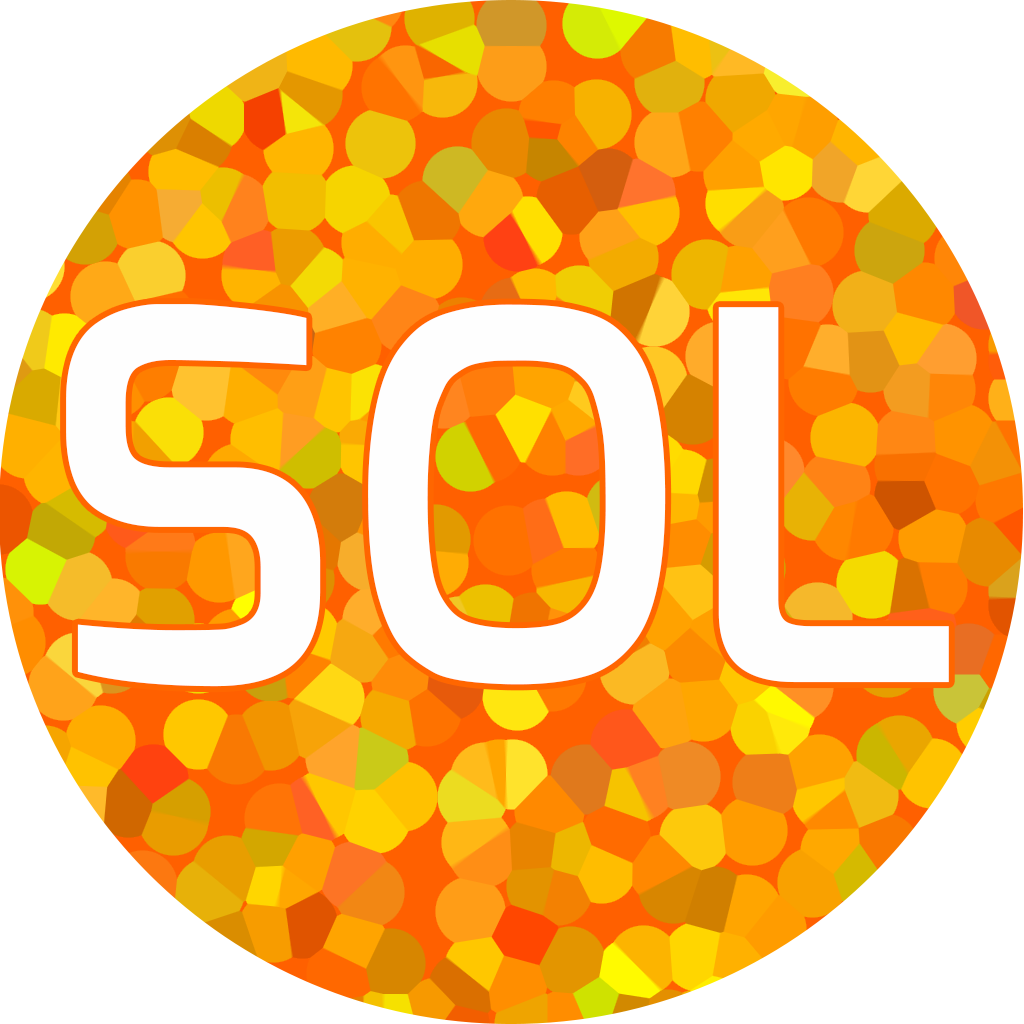
<style>
.page{position:relative;width:1024px;height:1024px;background:#ffffff}
.page>*{position:absolute;margin:0}
.t1{font:512px "Exo-DemiBold";color:#fefefe}
</style>
<div class="page">
<p class="t1" style="left:66px;top:304px;width:883px;height:383px">SOL</p>
</div>
